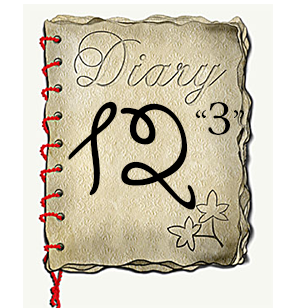
<style>
.page{position:relative;width:300px;height:308px}
.page>*{position:absolute;margin:0}
.t1{font:140px "GiddyupStd";color:#000000}
.t2{font:48px "DaunPenh";color:#000000}
.t3{font:48px "MinionPro-Regular";color:#000000}
</style>
<div class="page">
<p class="t1" style="left:68px;top:101px;width:128px;height:109px">12</p>
<p class="t2" style="left:196px;top:102px;width:48px;height:33px">“<span class="t3">З</span>”</p>
</div>
